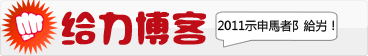
<style>
.page{position:relative;width:368px;height:56px;background:#efefef}
.page>*{position:absolute;margin:0}
.t1{font:36px "SXSLST";color:#be0d16;font-weight:bold}
.t2{font:12px "MicrosoftYaHei";color:#000000}
</style>
<div class="page">
<p class="t1" style="left:61px;top:11px;width:145px;height:34px">给力博客</p>
<p class="t2" style="left:217px;top:19px;width:118px;height:13px">2011示申馬者阝給屴！</p>
</div>
